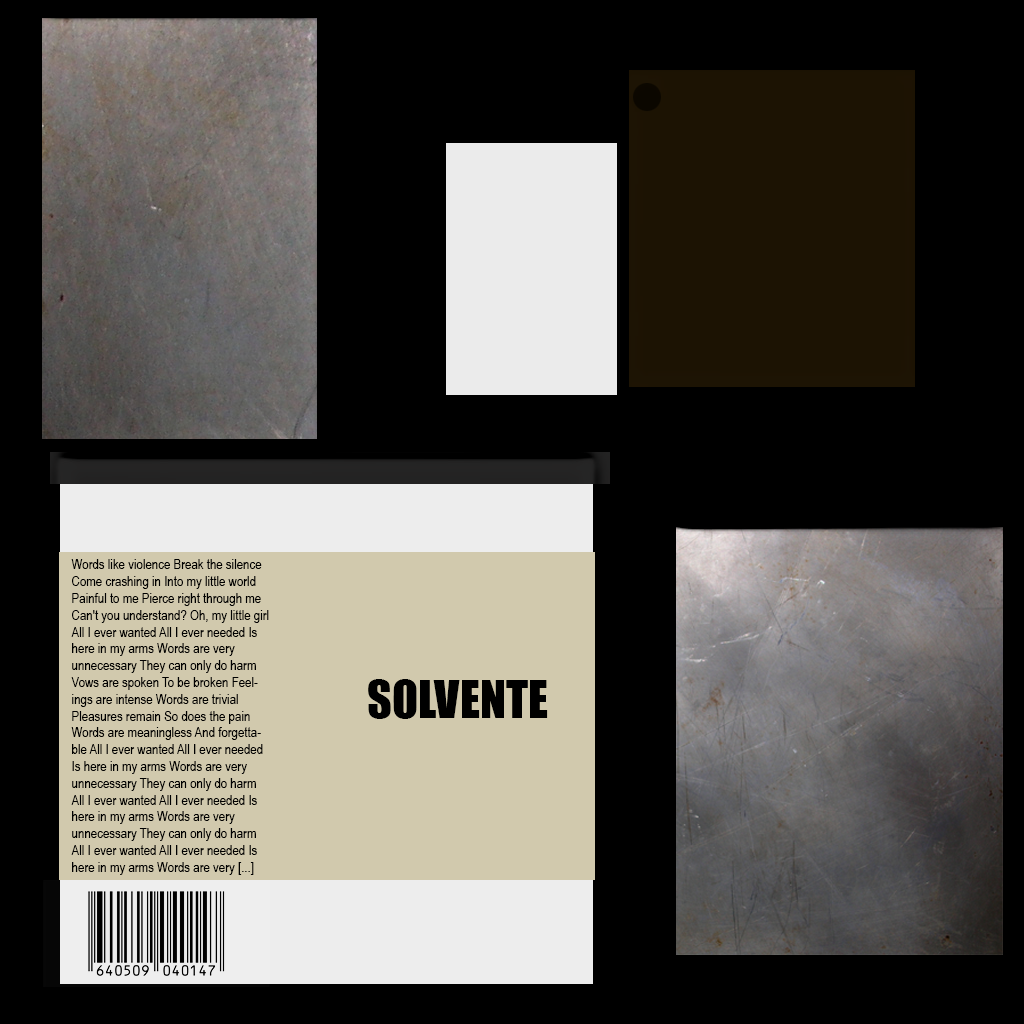
<style>
.page{position:relative;width:1024px;height:1024px;background:#000000}
.page>*{position:absolute;margin:0}
.t1{font:14px "ArialNarrow";color:#000000}
.t2{font:48px "Impact";color:#000000}
</style>
<div class="page">
<p class="t1" style="left:71px;top:559px;width:198px;height:316px">Words like violence Break the silence Come crashing in Into my little world Painful to me Pierce right through me Can't you understand? Oh, my little girl All I ever wanted All I ever needed Is here in my arms Words are very unnecessary They can only do harm Vows are spoken To be broken Feelings are intense Words are trivial Pleasures remain So does the pain Words are meaningless And forgettable All I ever wanted All I ever needed Is here in my arms Words are very unnecessary They can only do harm All I ever wanted All I ever needed Is here in my arms Words are very unnecessary They can only do harm All I ever wanted All I ever needed Is here in my arms Words are very [...]</p>
<p class="t2" style="left:368px;top:679px;width:180px;height:40px">SOLVENTE</p>
</div>
